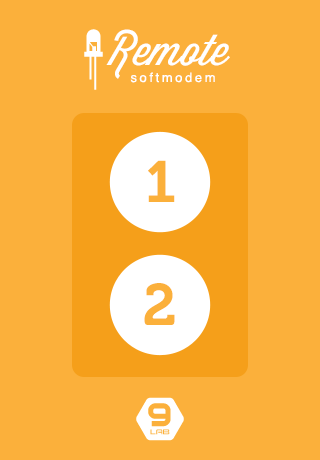
<style>
.page{position:relative;width:320px;height:460px;background:#fbb03b}
.page>*{position:absolute;margin:0}
.t1{font:42px "WisdomScriptAI";color:#ffffff}
.t2{font:13px "Helvetica";letter-spacing:0.2em;color:#ffffff}
.t3{font:58px "Museo-700";letter-spacing:-0.02em;color:#fbb03b}
</style>
<div class="page">
<p class="t1" style="left:106px;top:29px;width:124px;height:50px">Remote</p>
<p class="t2" style="left:130px;top:72px;width:85px;height:11px">softmodem</p>
<p class="t3" style="left:148px;top:160px;width:27px;height:42px">1</p>
<p class="t3" style="left:144px;top:283px;width:31px;height:42px">2</p>
</div>
